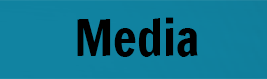
<style>
.page{position:relative;width:267px;height:79px;background:#1183a1}
.page>*{position:absolute;margin:0}
.t1{font:50px "FrancoisOne-Regular";color:#000000}
</style>
<div class="page">
<p class="t1" style="left:77px;top:17px;width:121px;height:40px">Media</p>
</div>
